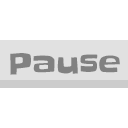
<style>
.page{position:relative;width:128px;height:128px;background:#ffffff}
.page>*{position:absolute;margin:0}
.t1{font:30px "Slackey-Regular";color:#818181}
</style>
<div class="page">
<p class="t1" style="left:10px;top:53px;width:110px;height:22px">Pause</p>
</div>
